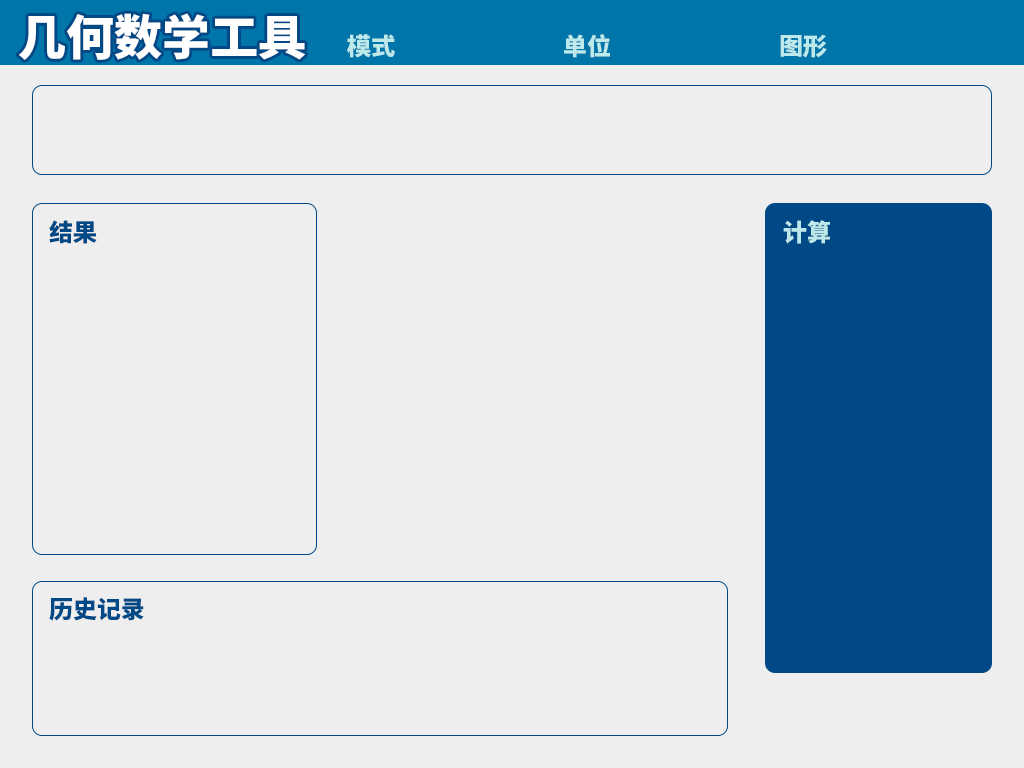
<style>
.page{position:relative;width:1024px;height:768px;background:#eeeeee}
.page>*{position:absolute;margin:0}
.t1{font:48px "SourceHanSansSC-Heavy";color:#ffffff}
.t2{font:24px "SourceHanSansSC-Heavy";color:#bee9ea}
.t3{font:24px "SourceHanSansSC-Heavy";color:#004986}
</style>
<div class="page">
<p class="t1" style="left:18px;top:13px;width:288px;height:47px">几何数学工具</p>
<p class="t2" style="left:347px;top:34px;width:480px;height:24px">模式     单位     图形</p>
<p class="t3" style="left:49px;top:220px;width:48px;height:24px">结果</p>
<p class="t2" style="left:783px;top:220px;width:47px;height:24px">计算</p>
<p class="t3" style="left:49px;top:597px;width:95px;height:24px">历史记录</p>
</div>
